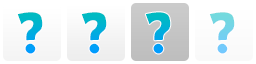
<style>
.page{position:relative;width:256px;height:64px;background:#ffffff}
.page>*{position:absolute;margin:0}
.t1{font:68px "BradyBunchRemastered";color:#00b4d0}
.t2{font:68px "BradyBunchRemastered";color:#73d6e5}
</style>
<div class="page">
<p class="t1" style="left:17px;top:12px;width:26px;height:42px">?</p>
<p class="t1" style="left:81px;top:12px;width:26px;height:42px">?</p>
<p class="t1" style="left:145px;top:12px;width:26px;height:42px">?</p>
<p class="t2" style="left:209px;top:12px;width:26px;height:42px">?</p>
</div>
